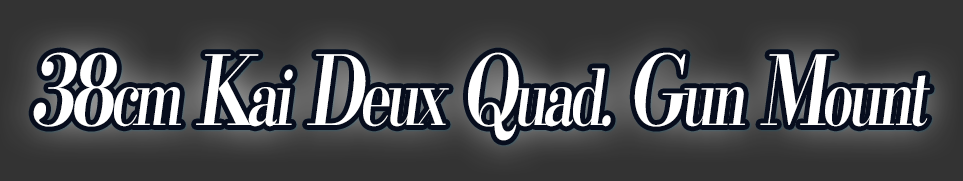
<style>
.page{position:relative;width:963px;height:181px;background:#333333}
.page>*{position:absolute;margin:0}
.t1{font:76.8px "KochoStd-Heavy";letter-spacing:-0.08em;color:#ffffff;font-style:italic;scale:0.74 1}
.t2{font:96px "KochoStd-Heavy";letter-spacing:-0.08em;color:#ffffff;font-style:italic;scale:0.74 1}
</style>
<div class="page">
<p class="t1" style="left:33px;top:52px;width:897px;height:89px"><span class="t2">38</span>cm<span class="t2"> K</span>ai<span class="t2"> D</span>eux<span class="t2"> Q</span>uad.<span class="t2"> G</span>un<span class="t2"> M</span>ount</p>
</div>
